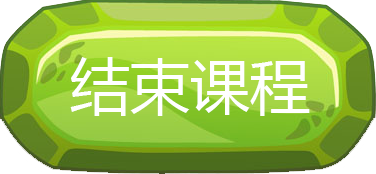
<style>
.page{position:relative;width:376px;height:174px}
.page>*{position:absolute;margin:0}
.t1{font:60px "MicrosoftYaHei";color:#ffffff}
</style>
<div class="page">
<p class="t1" style="left:70px;top:57px;width:240px;height:59px">结束课程</p>
</div>
